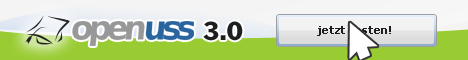
<style>
.page{position:relative;width:468px;height:60px;background:#99cc33}
.page>*{position:absolute;margin:0}
.t1{font:33.1px "BitstreamVeraSans-Bold";letter-spacing:-0.15em;color:#989898}
.t2{font:33.1px "BitstreamVeraSans-Bold";letter-spacing:-0.1em;color:#989898}
.t3{font:33.1px "BitstreamVeraSans-Bold";letter-spacing:-0.15em;color:#2a649f}
.t4{font:27.8px "FranklinGothic";color:#1e1e1e}
.t5{font:11px "Verdana-Bold";color:#1e1e1e}
</style>
<div class="page">
<p class="t1" style="left:72px;top:21px;width:122px;height:25px">ope<span class="t2">n</span><span class="t3">uss</span></p>
<p class="t4" style="left:203px;top:21px;width:40px;height:20px">3.0</p>
<p class="t5" style="left:317px;top:26px;width:74px;height:10px">jetzt testen!</p>
</div>
